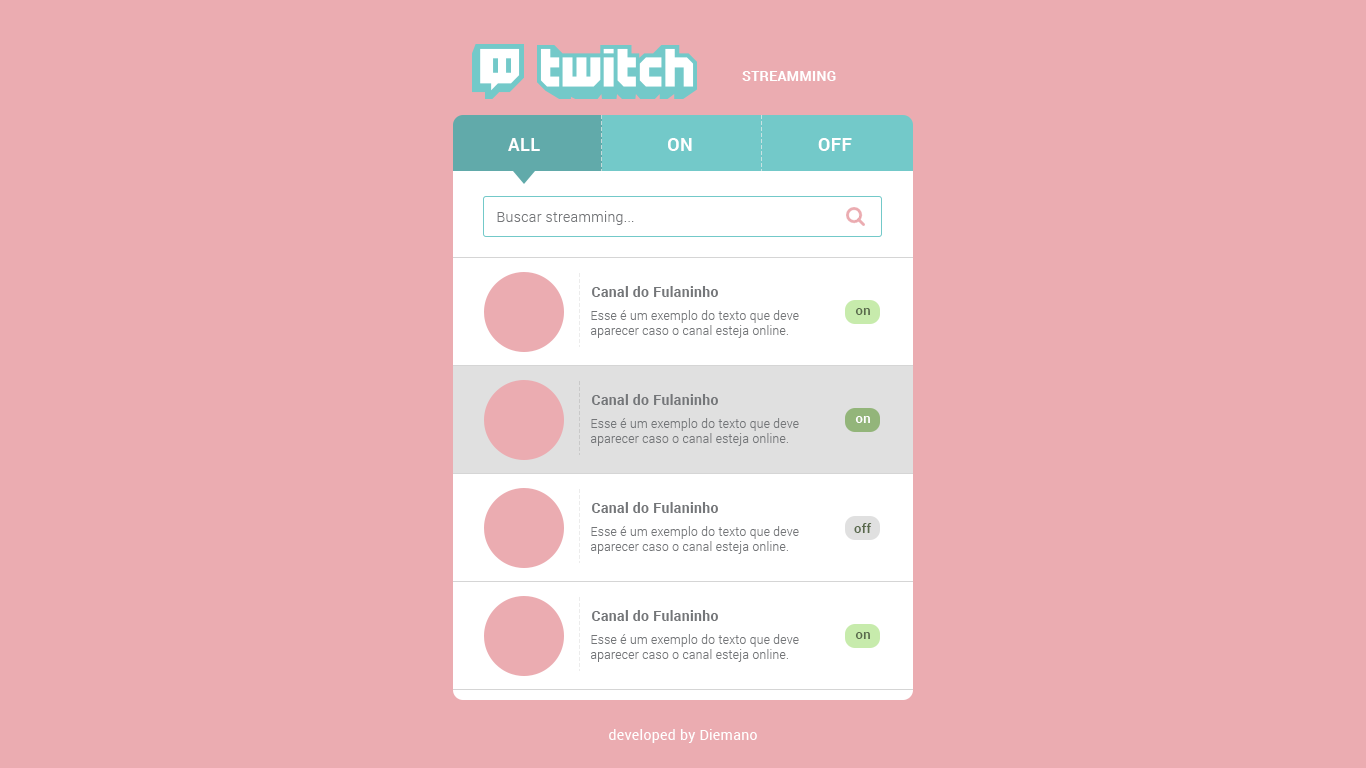
<style>
.page{position:relative;width:1366px;height:768px;background:#ebacb1}
.page>*{position:absolute;margin:0}
.t1{font:14px "Roboto-Bold";letter-spacing:0.025em;color:#ffffff}
.t2{font:18px "Roboto-Bold";letter-spacing:0.025em;color:#ffffff}
.t3{font:14px "Roboto-Light";letter-spacing:0.025em;color:#747679}
.t4{font:14px "Roboto-Bold";letter-spacing:0.025em;color:#747679}
.t5{font:12px "Roboto-Light";letter-spacing:0.025em;color:#747679}
.t6{font:12.9px "Roboto-Medium";letter-spacing:0.025em;color:#59694c}
.t7{font:12.9px "Roboto-Medium";letter-spacing:0.025em;color:#ffffff}
.t8{font:14px "Roboto-Regular";letter-spacing:0.025em;color:#ffffff}
</style>
<div class="page">
<p class="t1" style="left:742px;top:71px;width:94px;height:10px">STREAMMING</p>
<p class="t2" style="left:508px;top:138px;width:32px;height:13px">ALL</p>
<p class="t2" style="left:668px;top:138px;width:24px;height:13px">ON</p>
<p class="t2" style="left:818px;top:138px;width:34px;height:13px">OFF</p>
<p class="t3" style="left:497px;top:211px;width:137px;height:14px">Buscar streamming...</p>
<p class="t4" style="left:592px;top:286px;width:126px;height:11px">Canal do Fulaninho</p>
<p class="t5" style="left:591px;top:310px;width:208px;height:28px">Esse é um exemplo do texto que deve<br>aparecer caso o canal esteja online.</p>
<p class="t6" style="left:855px;top:308px;width:15px;height:7px">on</p>
<p class="t4" style="left:592px;top:394px;width:126px;height:11px">Canal do Fulaninho</p>
<p class="t5" style="left:591px;top:418px;width:208px;height:28px">Esse é um exemplo do texto que deve<br>aparecer caso o canal esteja online.</p>
<p class="t7" style="left:855px;top:416px;width:15px;height:7px">on</p>
<p class="t4" style="left:592px;top:502px;width:126px;height:11px">Canal do Fulaninho</p>
<p class="t5" style="left:591px;top:526px;width:208px;height:28px">Esse é um exemplo do texto que deve<br>aparecer caso o canal esteja online.</p>
<p class="t6" style="left:854px;top:523px;width:18px;height:10px">off</p>
<p class="t4" style="left:592px;top:610px;width:126px;height:11px">Canal do Fulaninho</p>
<p class="t5" style="left:591px;top:634px;width:208px;height:28px">Esse é um exemplo do texto que deve<br>aparecer caso o canal esteja online.</p>
<p class="t6" style="left:855px;top:632px;width:15px;height:7px">on</p>
<p class="t8" style="left:609px;top:729px;width:148px;height:14px">developed by Diemano</p>
</div>
